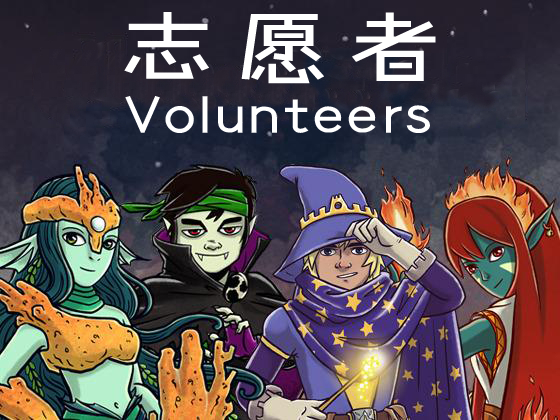
<style>
.page{position:relative;width:560px;height:420px}
.page>*{position:absolute;margin:0}
.t1{font:83.3px "--";letter-spacing:0.075em;color:#ffffff;scale:1.29 1}
.t2{font:58.8px "--";color:#ffffff;scale:1.17 1}
</style>
<div class="page">
<p class="t1" style="left:124px;top:12px;width:312px;height:72px">志愿者</p>
<p class="t2" style="left:125px;top:96px;width:305px;height:37px">Volunteers</p>
</div>
